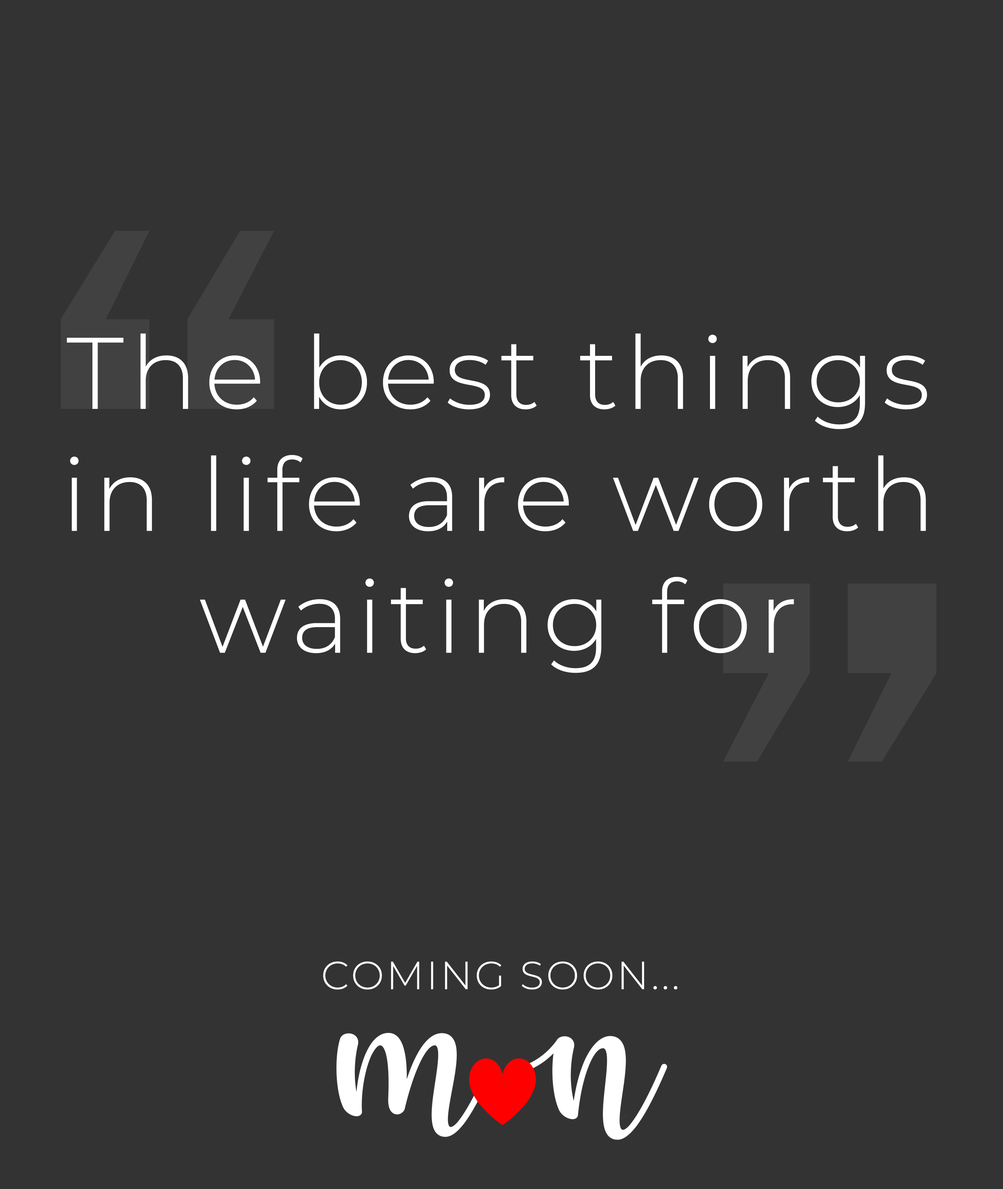
<style>
.page{position:relative;width:1003px;height:1189px;background:#333333}
.page>*{position:absolute;margin:0}
.t1{font:101.6px "Montserrat-Light";letter-spacing:0.06em;color:#ffffff}
.t2{font:655.4px "FranklinGothic-Demi";letter-spacing:0.06em;color:#414141}
.t3{font:39.3px "Montserrat-Light";letter-spacing:0.06em;color:#ffffff}
</style>
<div class="page">
<p class="t1" style="left:67px;top:333px;width:860px;height:340px;text-align:center">The best things<br>in life are worth<br>waiting for</p>
<p class="t2" style="left:723px;top:584px;width:213px;height:178px">”</p>
<p class="t3" style="left:323px;top:961px;width:354px;height:29px">COMING SOON...</p>
</div>
